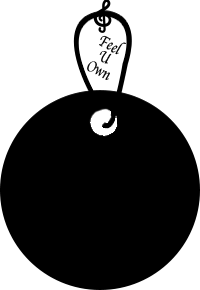
<style>
.page{position:relative;width:200px;height:290px;background:#000000}
.page>*{position:absolute;margin:0}
.t1{font:16px/2.3px "Apple-Chancery";color:#000000;scale:0.84 1}
</style>
<div class="page">
<p class="t1" style="left:87px;top:35px;width:39px;height:45px;text-align:center;rotate:27deg">Feel <br><br><br><br><br><br>U <br><br><br><br><br><br>Own</p>
</div>
